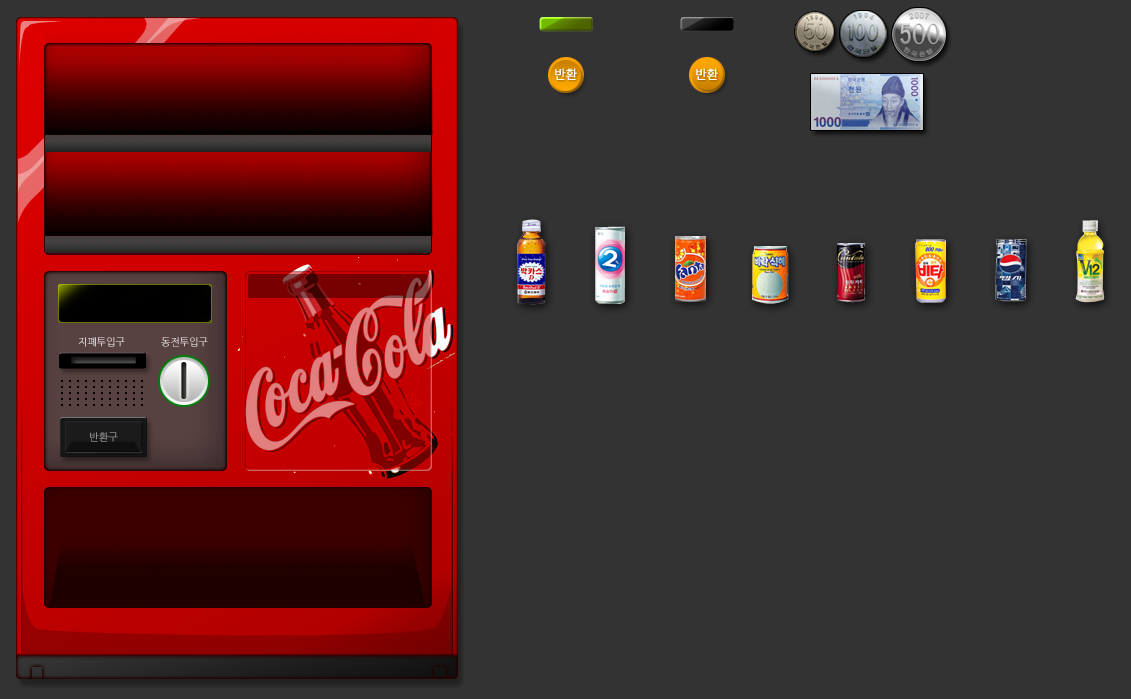
<style>
.page{position:relative;width:1131px;height:699px;background:#333333}
.page>*{position:absolute;margin:0}
.t1{font:12px "NanumGothic";color:#ffffff;font-weight:bold}
.t2{font:10px "NanumGothic"}
.t3{font:10px "NanumGothic";color:#909090;font-weight:bold}
</style>
<div class="page">
<p class="t1" style="left:555px;top:68px;width:22px;height:12px">반환</p>
<p class="t1" style="left:696px;top:68px;width:22px;height:12px">반환</p>
<p class="t2" style="left:78px;top:337px;width:47px;height:10px">지폐투입구</p>
<p class="t2" style="left:161px;top:337px;width:47px;height:10px">동전투입구</p>
<p class="t3" style="left:90px;top:432px;width:28px;height:10px">반환구</p>
</div>
